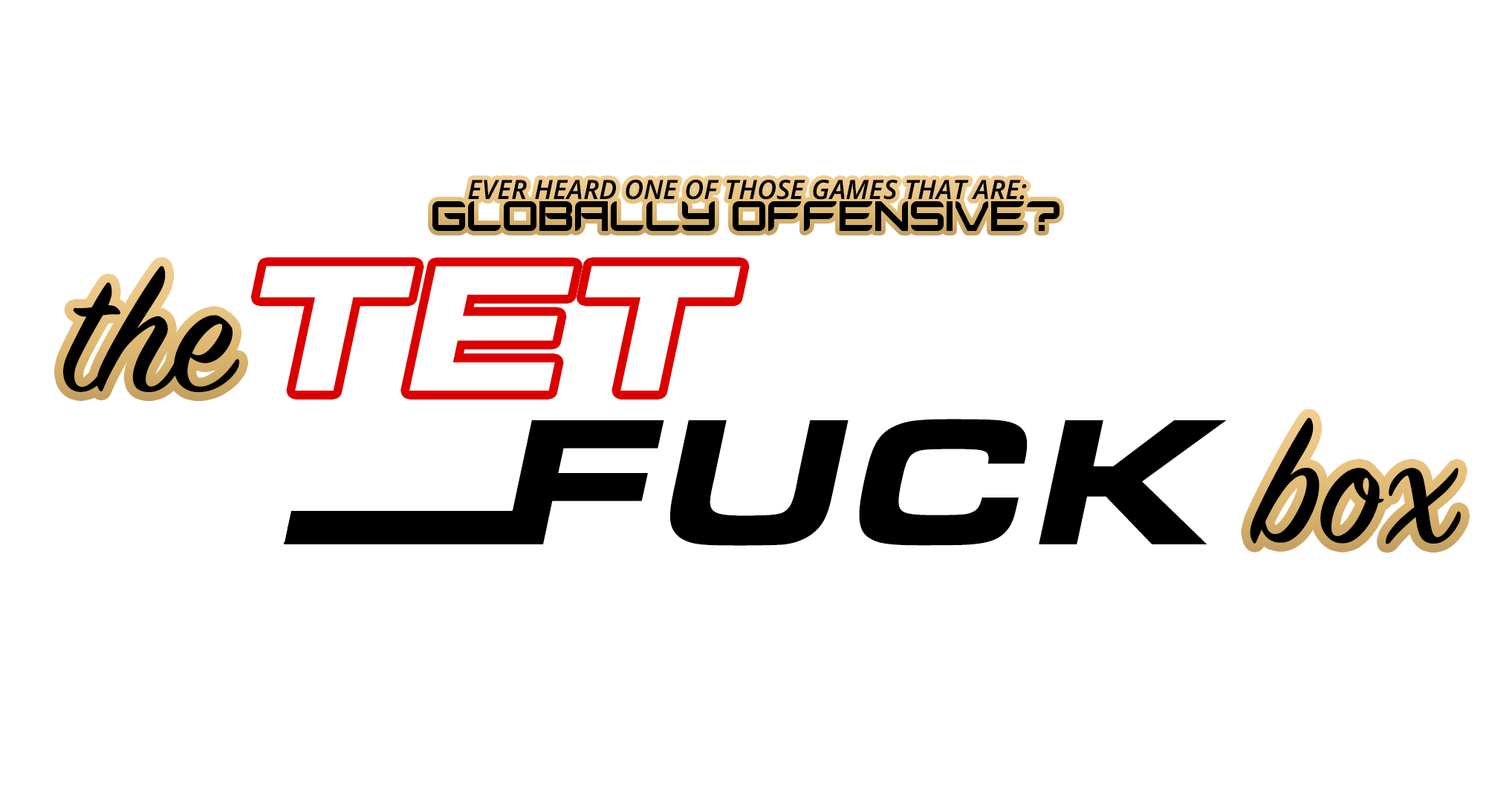
<style>
.page{position:relative;width:1486px;height:802px;background:#ffffff}
.page>*{position:absolute;margin:0}
.t1{font:26.7px "NotoSans-SemiBoldItalic";color:#000000}
.t2{font:26.7px "OffensiveRegularAllCaps";color:#000000}
.t3{font:186.4px "SignPainter-HouseScript";color:#000000}
.t4{font:186.4px "EurostileExt-BlaIta";color:#ffffff}
.t5{font:186.4px "EurostileExt-BlaIta";color:#000000}
</style>
<div class="page">
<p class="t1" style="left:432px;top:180px;width:628px;height:51px;text-align:center">EVER HEARD ONE OF THOSE GAMES THAT ARE:<br><span class="t2">GLOBALLY OFFENSIVE?</span></p>
<p class="t3" style="left:63px;top:266px;width:176px;height:126px">the</p>
<p class="t4" style="left:259px;top:266px;width:482px;height:125px">TET</p>
<p class="t5" style="left:505px;top:419px;width:722px;height:127px">FUCK</p>
<p class="t3" style="left:1250px;top:418px;width:211px;height:127px">box</p>
<p class="t5" style="left:284px;top:512px;width:266px;height:32px">----</p>
</div>
